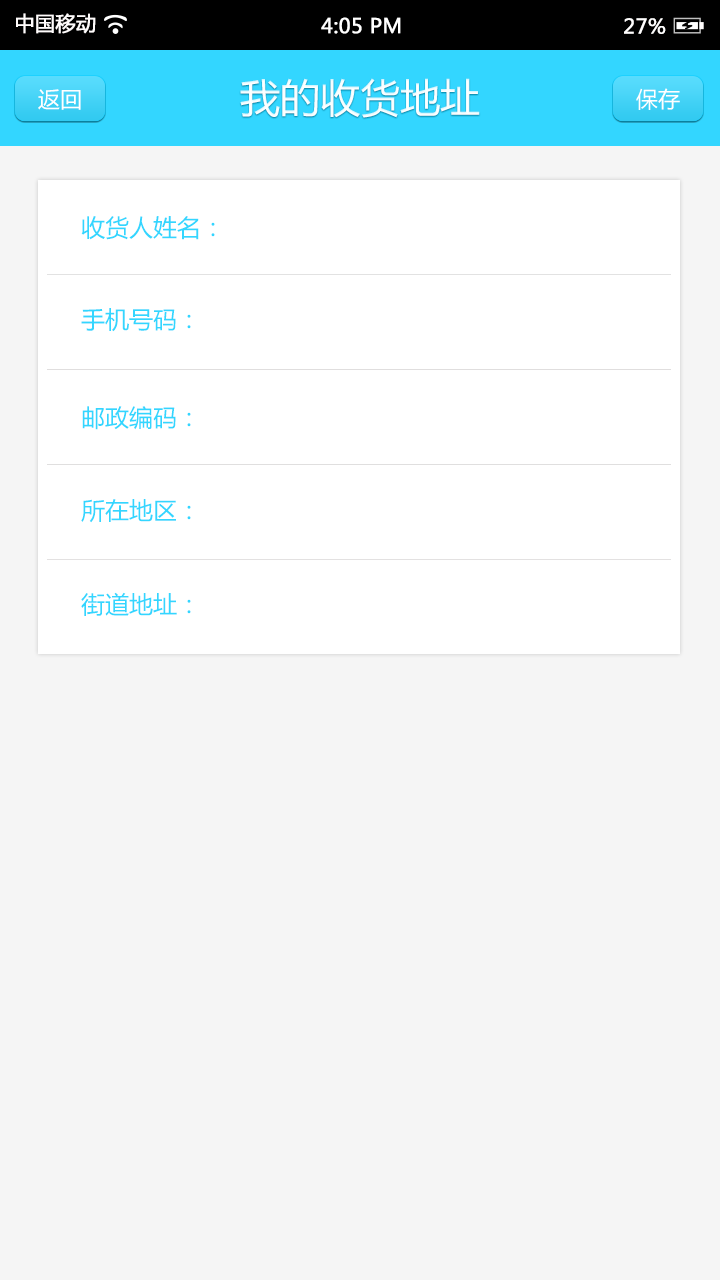
<style>
.page{position:relative;width:720px;height:1280px;background:#f5f5f5}
.page>*{position:absolute;margin:0}
.t1{font:20px "MicrosoftYaHei";color:#fffcfc;font-weight:bold}
.t2{font:20px "MicrosoftYaHei";color:#ffffff;font-weight:bold}
.t3{font:20px "MicrosoftYaHei";color:#fffefe;font-weight:bold}
.t4{font:40px "MicrosoftYaHei";color:#ffffff}
.t5{font:22px "MicrosoftYaHei";color:#ffffff}
.t6{font:24px "MicrosoftYaHei";color:#33d6ff}
</style>
<div class="page">
<p class="t1" style="left:16px;top:13px;width:80px;height:21px">中国移动</p>
<p class="t2" style="left:321px;top:17px;width:80px;height:17px">4:05 PM</p>
<p class="t3" style="left:624px;top:18px;width:42px;height:16px">27%</p>
<p class="t4" style="left:240px;top:78px;width:240px;height:40px">我的收货地址</p>
<p class="t5" style="left:38px;top:89px;width:43px;height:21px">返回</p>
<p class="t5" style="left:636px;top:88px;width:44px;height:22px">保存</p>
<p class="t6" style="left:81px;top:216px;width:134px;height:24px">收货人姓名：</p>
<p class="t6" style="left:81px;top:308px;width:110px;height:24px">手机号码：</p>
<p class="t6" style="left:82px;top:406px;width:109px;height:24px">邮政编码：</p>
<p class="t6" style="left:81px;top:499px;width:110px;height:24px">所在地区：</p>
<p class="t6" style="left:81px;top:592px;width:110px;height:24px">街道地址：</p>
</div>
